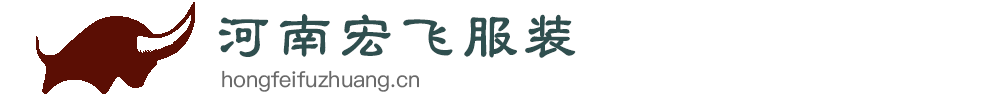
<style>
.page{position:relative;width:1000px;height:100px;background:#ffffff}
.page>*{position:absolute;margin:0}
.t1{font:60px "STLibianSC-Regular";color:#2f4f4f;font-weight:bold}
.t2{font:22px "PingFangSC-Regular";color:#6a6a6a}
</style>
<div class="page">
<p class="t1" style="left:218px;top:14px;width:358px;height:44px">河南宏飞服装</p>
<p class="t2" style="left:222px;top:70px;width:197px;height:22px">hongfeifuzhuang.cn</p>
</div>
